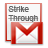
<style>
.page{position:relative;width:48px;height:48px;background:#ffffff}
.page>*{position:absolute;margin:0}
.t1{font:8px/9px "ArialMT";color:#636363}
</style>
<div class="page">
<p class="t1" style="left:8px;top:5px;width:31px;height:18px">Strike<br>Through</p>
</div>
